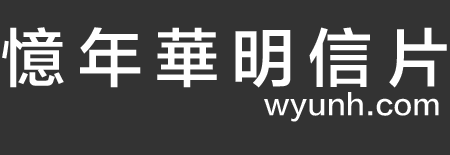
<style>
.page{position:relative;width:450px;height:155px;background:#333333}
.page>*{position:absolute;margin:0}
.t1{font:64px "FZLTZHK--GBK1-0";letter-spacing:0.2em;color:#ffffff}
.t2{font:28px "FZLTZHK--GBK1-0";letter-spacing:0.02em;color:#ffffff}
</style>
<div class="page">
<p class="t1" style="left:2px;top:27px;width:445px;height:61px">憶年華明信片</p>
<p class="t2" style="left:264px;top:92px;width:175px;height:30px">wyunh.com</p>
</div>
